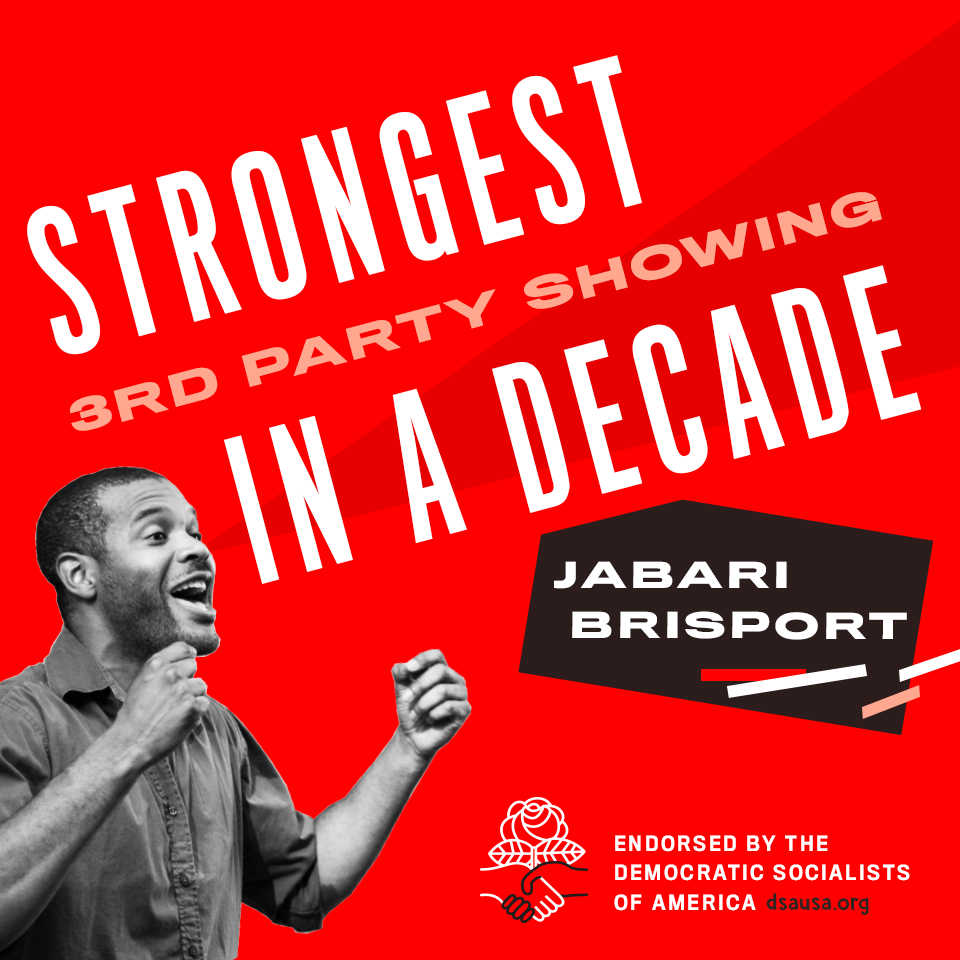
<style>
.page{position:relative;width:960px;height:960px;background:#ff0000}
.page>*{position:absolute;margin:0}
.t1{font:186.1px "TitlingGothicFBSkyline-Standard";letter-spacing:0.11em;color:#ffffff;text-transform:uppercase}
.t2{font:33.6px/50.5px "TitlingGothicFBExtended-Bold";letter-spacing:0.11em;color:#ffffff;text-transform:uppercase}
.t3{font:19.5px/29.4px "TitlingGothicFBNarrow-Medium";letter-spacing:0.13em;color:#ffffff}
.t4{font:24.5px "DKWhaleSong-Regular";letter-spacing:0.025em;color:#2e2e2e}
</style>
<div class="page">
<p class="t1" style="left:27px;top:55px;width:615px;height:300px;rotate:-15deg">STRONGEST</p>
<p class="t1" style="left:224px;top:265px;width:698px;height:319px;rotate:-15deg">IN A DECADE</p>
<p class="t2" style="left:554px;top:561px;width:353px;height:79px">JABARI<br>BRISPORT</p>
<p class="t3" style="left:614px;top:835px;width:296px;height:76px">ENDORSED BY THE<br>DEMOCRATIC SOCIALISTS<br>OF AMERICA</p>
<p class="t4" style="left:766px;top:893px;width:103px;height:22px">dsausa.org</p>
</div>
